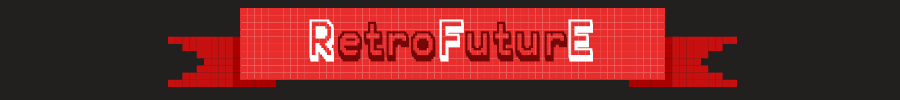
<style>
.page{position:relative;width:900px;height:100px;background:#221f1f}
.page>*{position:absolute;margin:0}
.t1{font:47.4px "KarmaFuture-Regular";color:#740808}
.t2{font:47.4px "KarmaFuture-Regular";color:#ffffff}
</style>
<div class="page">
<p class="t1" style="left:309px;top:19px;width:284px;height:43px"><span class="t2">R</span>etro<span class="t2">F</span>utur<span class="t2">E</span></p>
</div>
